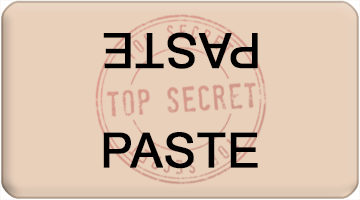
<style>
.page{position:relative;width:360px;height:200px;background:#e8d0bb}
.page>*{position:absolute;margin:0}
.t1{font:48px "ArialMT";color:#000000;font-weight:bold}
</style>
<div class="page">
<p class="t1" style="left:103px;top:32px;width:155px;height:37px;rotate:180deg">PASTE</p>
<p class="t1" style="left:103px;top:132px;width:155px;height:37px">PASTE</p>
</div>
